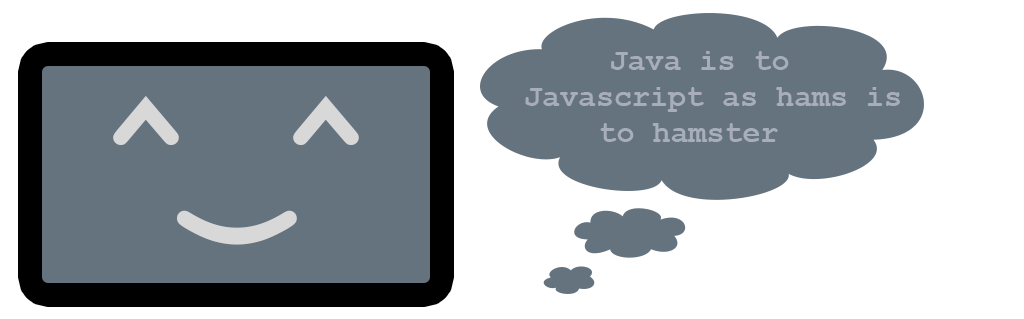
<style>
.page{position:relative;width:1024px;height:319px;background:#ffffff}
.page>*{position:absolute;margin:0}
.t1{font:30px "CourierNewPS-BoldMT";color:#a7adba}
.t2{font:150px "CourierNewPS-BoldMT";color:#d8d8d8}
</style>
<div class="page">
<p class="t1" style="left:525px;top:51px;width:375px;height:91px;text-align:center">Java is to <br>Javascript as hams is to hamster</p>
<p class="t2" style="left:113px;top:96px;width:246px;height:49px">^ ^</p>
<p class="t2" style="left:177px;top:210px;width:120px;height:35px;rotate:90deg">)</p>
</div>
